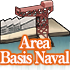
<style>
.page{position:relative;width:70px;height:70px;background:#ffffff}
.page>*{position:absolute;margin:0}
.t1{font:16px/15px "RyuminPro-ExBold";letter-spacing:-0.08em;color:#ffffff;scale:0.9 1}
</style>
<div class="page">
<p class="t1" style="left:0px;top:36px;width:70px;height:28px;text-align:center">Area<br>Basis Naval</p>
</div>
